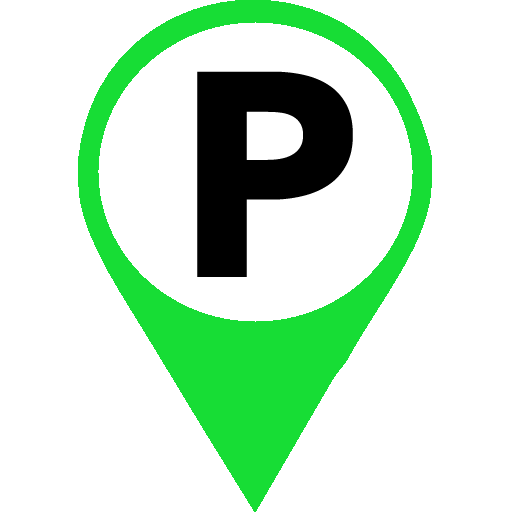
<style>
.page{position:relative;width:512px;height:512px;background:#ffffff}
.page>*{position:absolute;margin:0}
.t1{font:290px "AvenirNext-Bold";color:#000000}
</style>
<div class="page">
<p class="t1" style="left:197px;top:71px;width:156px;height:206px">P</p>
</div>
